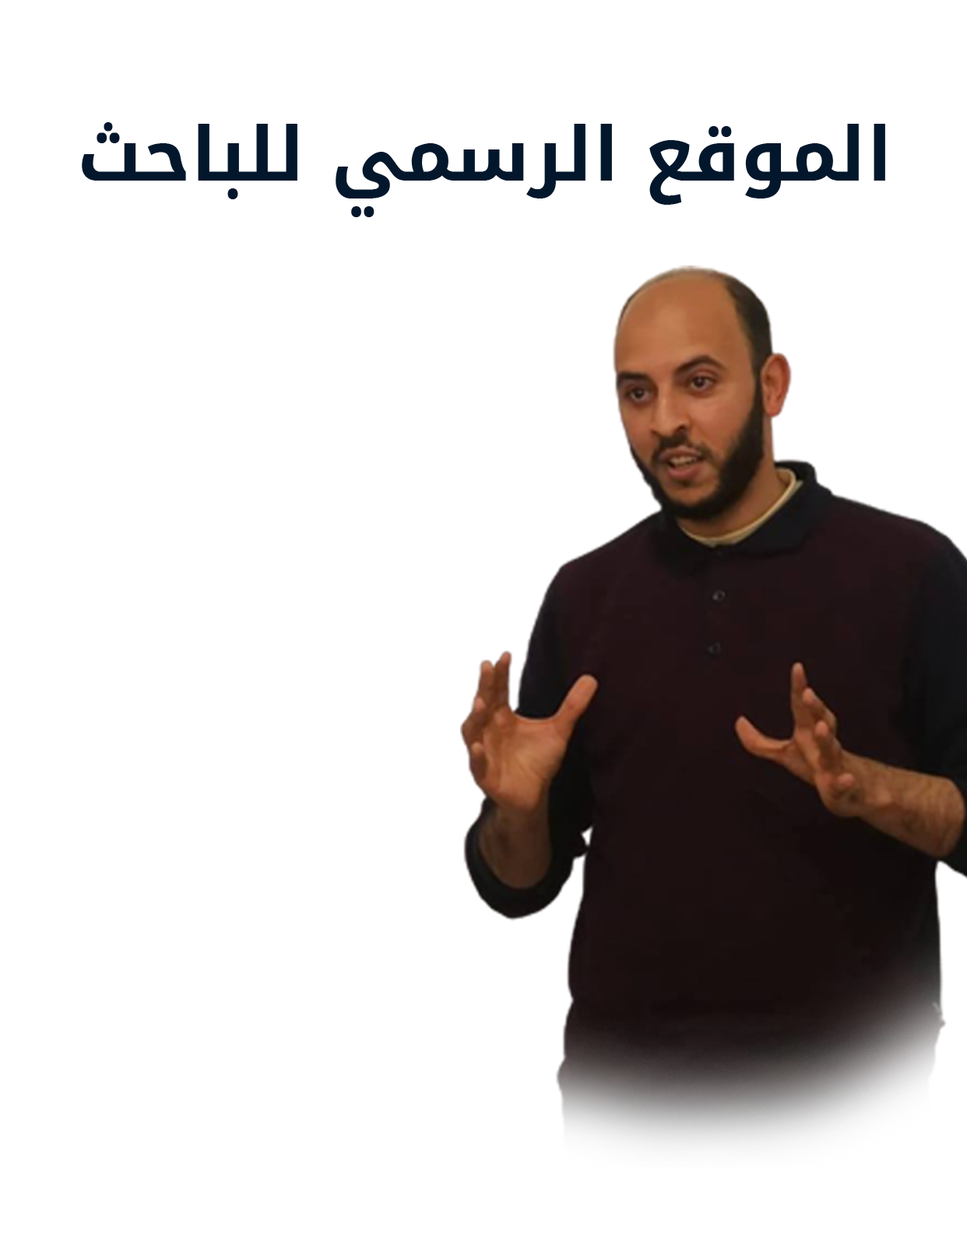
<style>
.page{position:relative;width:967px;height:1233px;background:#ffffff}
.page>*{position:absolute;margin:0}
.t1{font:74.8px "NotoKufiArabic-Bold";color:#03172c}
</style>
<div class="page">
<p class="t1" style="left:82px;top:122px;width:803px;height:95px">الموقع الرسمي للباحث</p>
</div>
